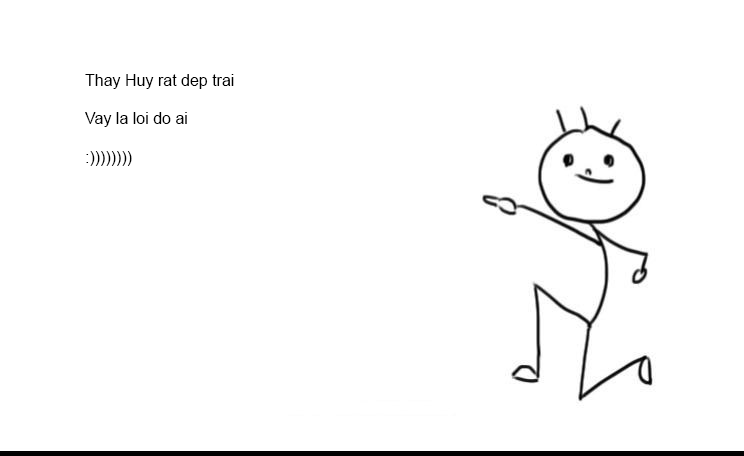
<style>
.page{position:relative;width:744px;height:456px;background:#ffffff}
.page>*{position:absolute;margin:0}
.t1{font:12px "ArialMT";color:#000000}
</style>
<div class="page">
<p class="t1" style="left:85px;top:74px;width:149px;height:92px">Thay Huy rat dep trai<br><br>Vay la loi do ai<br><br>:))))))))</p>
</div>
